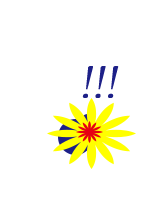
<style>
.page{position:relative;width:164px;height:209px;background:#ffffff}
.page>*{position:absolute;margin:0}
.t1{font:48.6px "FZBWKSJW--GB1-0";color:#1d2088;font-style:italic}
</style>
<div class="page">
<p class="t1" style="left:82px;top:66px;width:37px;height:32px">!!!</p>
</div>
